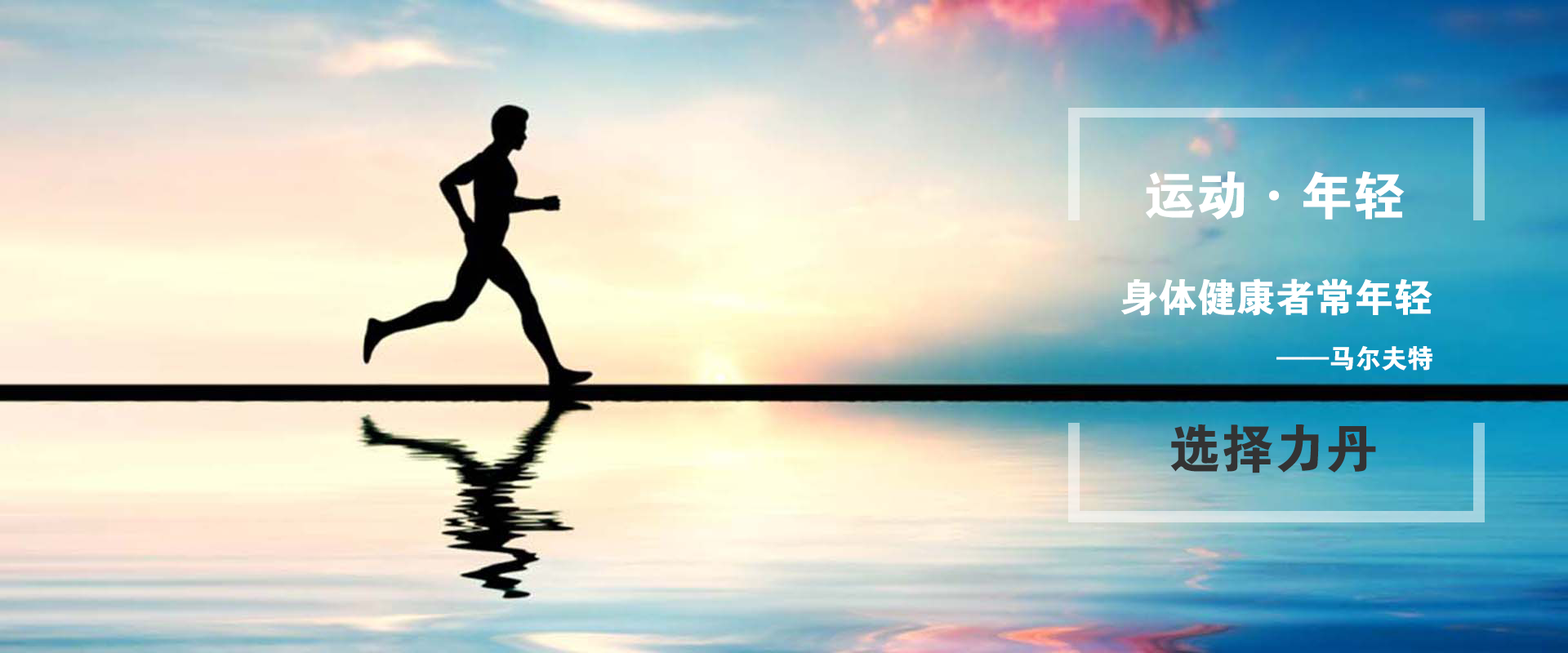
<style>
.page{position:relative;width:1568px;height:653px}
.page>*{position:absolute;margin:0}
.t1{font:52.3px "FZDHTJW--GB1-0";color:#ffffff}
.t2{font:39.2px "FZDHTJW--GB1-0";color:#ffffff}
.t3{font:26.1px "FZDHTJW--GB1-0";color:#ffffff}
.t4{font:52.3px "FZDHTJW--GB1-0";color:#333333}
</style>
<div class="page">
<p class="t1" style="left:1146px;top:171px;width:259px;height:49px">运动·年轻</p>
<p class="t2" style="left:1121px;top:278px;width:311px;height:38px">身体健康者常年轻</p>
<p class="t3" style="left:1276px;top:345px;width:156px;height:26px">——马尔夫特</p>
<p class="t4" style="left:1170px;top:425px;width:206px;height:49px">选择力丹</p>
</div>
